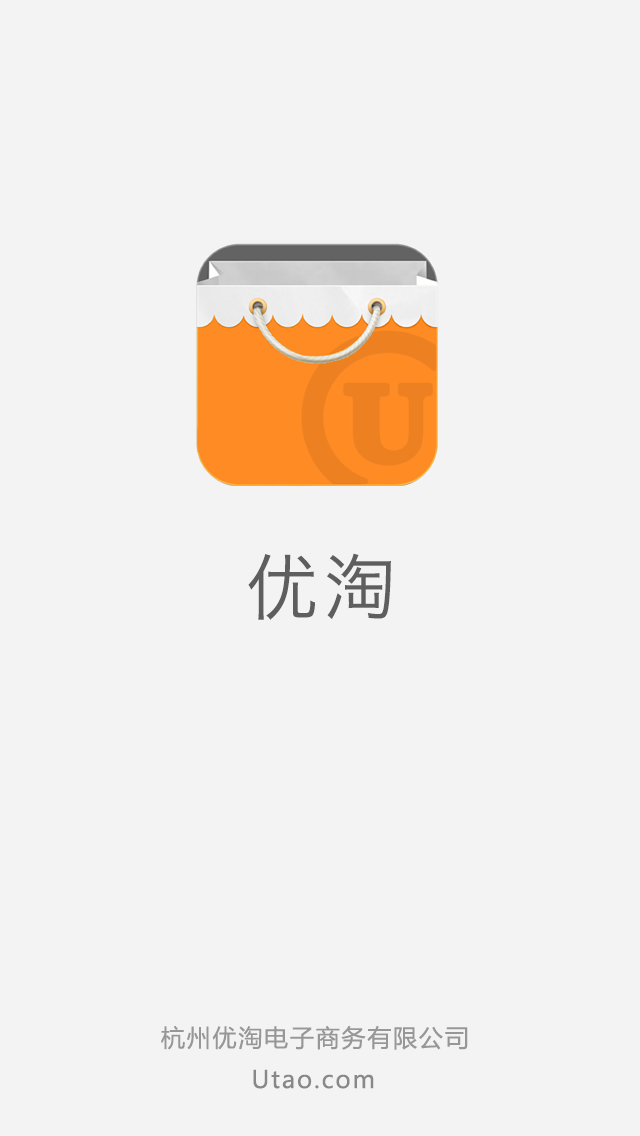
<style>
.page{position:relative;width:640px;height:1136px;background:#f3f3f3}
.page>*{position:absolute;margin:0}
.t1{font:72px "HiraginoSansGB-W3";letter-spacing:0.075em;color:#5f5e5e}
.t2{font:24px "MicrosoftYaHei";letter-spacing:0.075em;color:#979797}
.t3{font:24px "MicrosoftYaHei";letter-spacing:0.075em;color:#898888}
</style>
<div class="page">
<p class="t1" style="left:248px;top:553px;width:143px;height:67px">优淘</p>
<p class="t2" style="left:161px;top:1025px;width:307px;height:25px">杭州优淘电子商务有限公司</p>
<p class="t3" style="left:253px;top:1069px;width:121px;height:20px">Utao.com</p>
</div>
